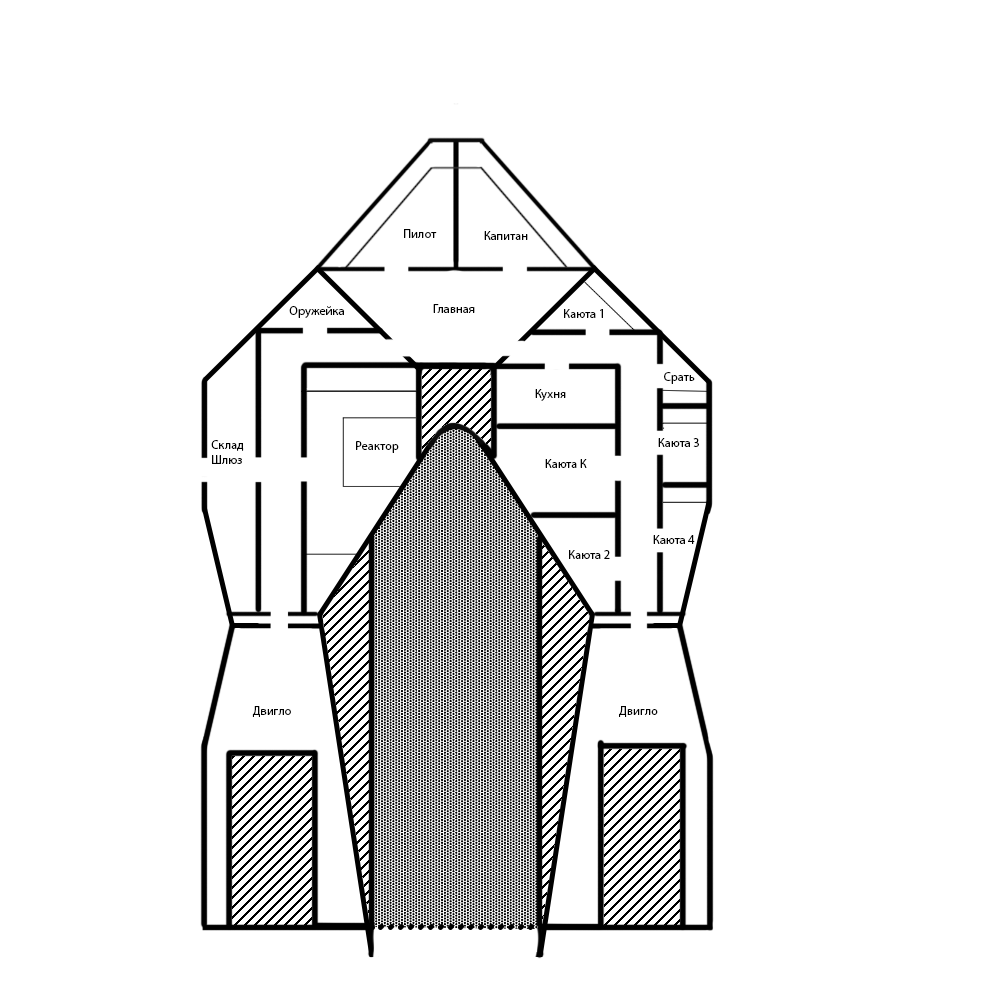
<style>
.page{position:relative;width:1000px;height:1000px;background:#ffffff}
.page>*{position:absolute;margin:0}
.t1{font:12.5px "MyriadPro-Regular";color:#000000}
</style>
<div class="page">
<p class="t1" style="left:404px;top:229px;width:33px;height:9px">Пилот</p>
<p class="t1" style="left:484px;top:231px;width:44px;height:9px">Капитан</p>
<p class="t1" style="left:433px;top:304px;width:42px;height:9px">Главная</p>
<p class="t1" style="left:289px;top:306px;width:55px;height:12px">Оружейка</p>
<p class="t1" style="left:564px;top:309px;width:39px;height:9px">Каюта 1</p>
<p class="t1" style="left:664px;top:372px;width:31px;height:12px">Срать</p>
<p class="t1" style="left:535px;top:389px;width:31px;height:12px">Кухня</p>
<p class="t1" style="left:658px;top:438px;width:41px;height:9px">Каюта 3</p>
<p class="t1" style="left:211px;top:440px;width:33px;height:24px">Склад<br>Шлюз</p>
<p class="t1" style="left:356px;top:441px;width:43px;height:12px">Реактор</p>
<p class="t1" style="left:545px;top:459px;width:42px;height:9px">Каюта К</p>
<p class="t1" style="left:653px;top:535px;width:42px;height:9px">Каюта 4</p>
<p class="t1" style="left:569px;top:550px;width:41px;height:9px">Каюта 2</p>
<p class="t1" style="left:252px;top:706px;width:39px;height:11px">Двигло</p>
<p class="t1" style="left:619px;top:706px;width:39px;height:11px">Двигло</p>
</div>
